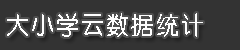
<style>
.page{position:relative;width:240px;height:50px;background:#333333}
.page>*{position:absolute;margin:0}
.t1{font:25px "CTZhongYuanSJ";color:#fefefe}
</style>
<div class="page">
<p class="t1" style="left:7px;top:13px;width:196px;height:24px">大小学云数据统计</p>
</div>
